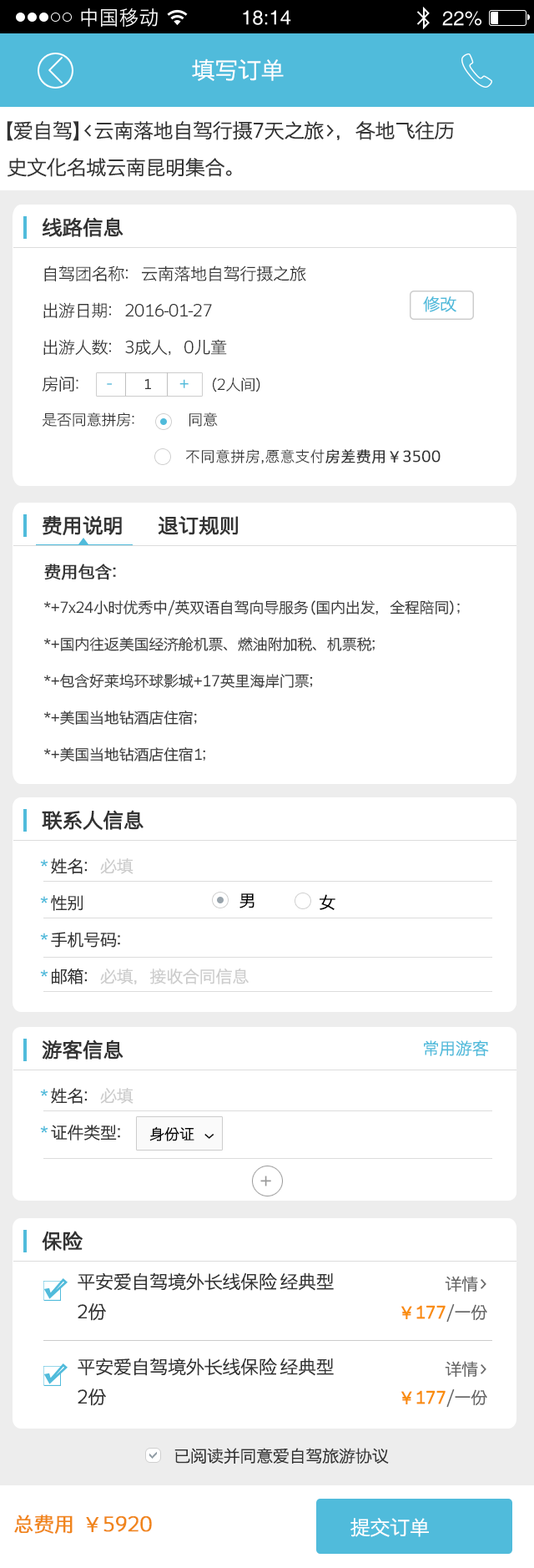
<style>
.page{position:relative;width:534px;height:1568px;background:#ffffff}
.page>*{position:absolute;margin:0}
.t1{font:23.4px "STHeitiSC-Light";letter-spacing:-0.04em;color:#ffffff;scale:1.03 1}
.t2{font:20px/36.7px "STHeitiSC-Light";letter-spacing:-0.04em;color:#333333;scale:1.03 1}
.t3{font:20px "STHeitiSC-Light";letter-spacing:-0.04em;color:#333333;font-weight:bold;scale:1.03 1}
.t4{font:16.7px/36.7px "STHeitiSC-Light";letter-spacing:-0.04em;color:#333333;scale:1.03 1}
.t5{font:15px/36.7px "STHeitiSC-Light";letter-spacing:-0.04em;color:#333333;scale:1.03 1}
.t6{font:15px/41.7px "STHeitiSC-Light";color:#333333}
.t7{font:15px/41.7px "STHeitiSC-Light";color:#333333;font-weight:bold}
.t8{font:16.7px "STHeitiSC-Light";letter-spacing:-0.04em;color:#50bbdb;scale:1.03 1}
.t9{font:16.7px "MicrosoftYaHei";color:#50bbdb}
.t10{font:15px "MicrosoftYaHei";color:#333333}
.t11{font:13.4px "MicrosoftYaHei";color:#333333}
.t12{font:16.7px/36.7px "STHeitiSC-Light";letter-spacing:-0.04em;color:#333333;font-weight:bold;scale:1.03 1}
.t13{font:16.7px/36.7px "STHeitiSC-Light";letter-spacing:-0.04em;color:#cccccc;scale:1.03 1}
.t14{font:16.7px/36.7px "STHeitiSC-Light";letter-spacing:-0.04em;color:#50bbdb;scale:1.03 1}
.t15{font:16.7px "STHeitiSC-Light";letter-spacing:-0.04em;color:#000000;scale:1.03 1}
.t16{font:15px "STHeitiSC-Light";letter-spacing:-0.04em;color:#000000;scale:1.03 1}
.t17{font:20px "STHeitiSC-Light";letter-spacing:-0.04em;color:#999999;scale:1.03 1}
.t18{font:18.4px/30.1px "STHeitiSC-Light";letter-spacing:-0.04em;color:#333333;scale:1.03 1}
.t19{font:16.7px "STHeitiSC-Light";letter-spacing:-0.04em;color:#666666;scale:1.03 1}
.t20{font:16.7px "STHeitiSC-Light";letter-spacing:-0.04em;color:#f98d0d;font-weight:bold;scale:1.03 1}
.t21{font:16.7px "STHeitiSC-Light";letter-spacing:-0.04em;color:#333333;scale:1.03 1}
.t22{font:20px "STHeitiSC-Light";letter-spacing:-0.04em;color:#f0851a;font-weight:bold;scale:1.03 1}
.t23{font:20px "STHeitiSC-Light";letter-spacing:-0.04em;color:#ffffff;scale:1.03 1}
.t24{font:16.7px "STHeitiSC-Light";letter-spacing:-0.04em;color:#ffffff;scale:1.03 1}
</style>
<div class="page">
<p class="t1" style="left:192px;top:58px;width:92px;height:23px">填写订单</p>
<p class="t2" style="left:7px;top:121px;width:447px;height:56px">【爱自驾】&lt;云南落地自驾行摄7天之旅&gt;，各地飞往历<br> 史文化名城云南昆明集合。</p>
<p class="t3" style="left:42px;top:217px;width:82px;height:20px">线路信息</p>
<p class="t4" style="left:42px;top:266px;width:399px;height:198px">自驾团名称：云南落地自驾行摄之旅<br>出游日期：2016-01-27<br>出游人数：3成人，0儿童<br>房间：                                           <span class="t5">（2人间）<br>是否同意拼房：                 同意<br>                                                          </span><span class="t6">不同意拼房,愿意支付</span><span class="t7">房差费用￥3500</span></p>
<p class="t8" style="left:423px;top:296px;width:34px;height:16px">修改</p>
<p class="t9" style="left:107px;top:378px;width:82px;height:11px"><span class="t10">  </span>-       <span class="t11">1      </span>+</p>
<p class="t3" style="left:42px;top:515px;width:196px;height:20px">费用说明         退订规则</p>
<p class="t5" style="left:43px;top:564px;width:417px;height:197px"><span class="t12">费用包含：<br></span>*+7x24小时优秀中/英双语自驾向导服务（国内出发，全程陪同）；<br>*+国内往返美国经济舱机票、燃油附加税、机票税；<br>*+包含好莱坞环球影城+17英里海岸门票；<br>*+美国当地钻酒店住宿；<br>*+美国当地钻酒店住宿1；</p>
<p class="t3" style="left:42px;top:810px;width:102px;height:20px">联系人信息</p>
<p class="t13" style="left:40px;top:858px;width:209px;height:127px"><span class="t14">* </span><span class="t4">姓名：</span>必填<br><span class="t14">* </span><span class="t4">性别<br></span><span class="t14">* </span><span class="t4">手机号码：<br></span><span class="t14">* </span><span class="t4">邮箱：</span>必填，接收合同信息</p>
<p class="t15" style="left:240px;top:893px;width:15px;height:15px">男</p>
<p class="t15" style="left:320px;top:894px;width:16px;height:16px">女</p>
<p class="t3" style="left:42px;top:1039px;width:82px;height:21px">游客信息</p>
<p class="t8" style="left:424px;top:1040px;width:65px;height:17px">常用游客</p>
<p class="t4" style="left:40px;top:1088px;width:94px;height:53px"><span class="t14">* </span>姓名：<span class="t13">必填<br></span><span class="t14">* </span>证件类型：</p>
<p class="t16" style="left:149px;top:1126px;width:46px;height:15px">身份证</p>
<p class="t16" style="left:205px;top:1134px;width:10px;height:5px">&gt;</p>
<p class="t17" style="left:260px;top:1176px;width:11px;height:10px">+</p>
<p class="t3" style="left:42px;top:1231px;width:41px;height:20px">保险</p>
<p class="t18" style="left:78px;top:1272px;width:256px;height:49px">平安爱自驾境外长线保险 经典型<br>2份</p>
<p class="t19" style="left:445px;top:1276px;width:42px;height:16px">详情&gt;</p>
<p class="t20" style="left:402px;top:1303px;width:86px;height:20px">￥177<span class="t19">/一份</span></p>
<p class="t18" style="left:78px;top:1358px;width:256px;height:48px">平安爱自驾境外长线保险 经典型<br>2份</p>
<p class="t19" style="left:445px;top:1361px;width:42px;height:16px">详情&gt;</p>
<p class="t20" style="left:402px;top:1388px;width:86px;height:20px">￥177<span class="t19">/一份</span></p>
<p class="t21" style="left:175px;top:1448px;width:214px;height:16px">已阅读并同意爱自驾旅游协议</p>
<p class="t22" style="left:14px;top:1515px;width:138px;height:19px">总费用  ￥5920</p>
<p class="t23" style="left:351px;top:1518px;width:78px;height:19px"><span class="t24">      </span>   提交订单</p>
</div>
